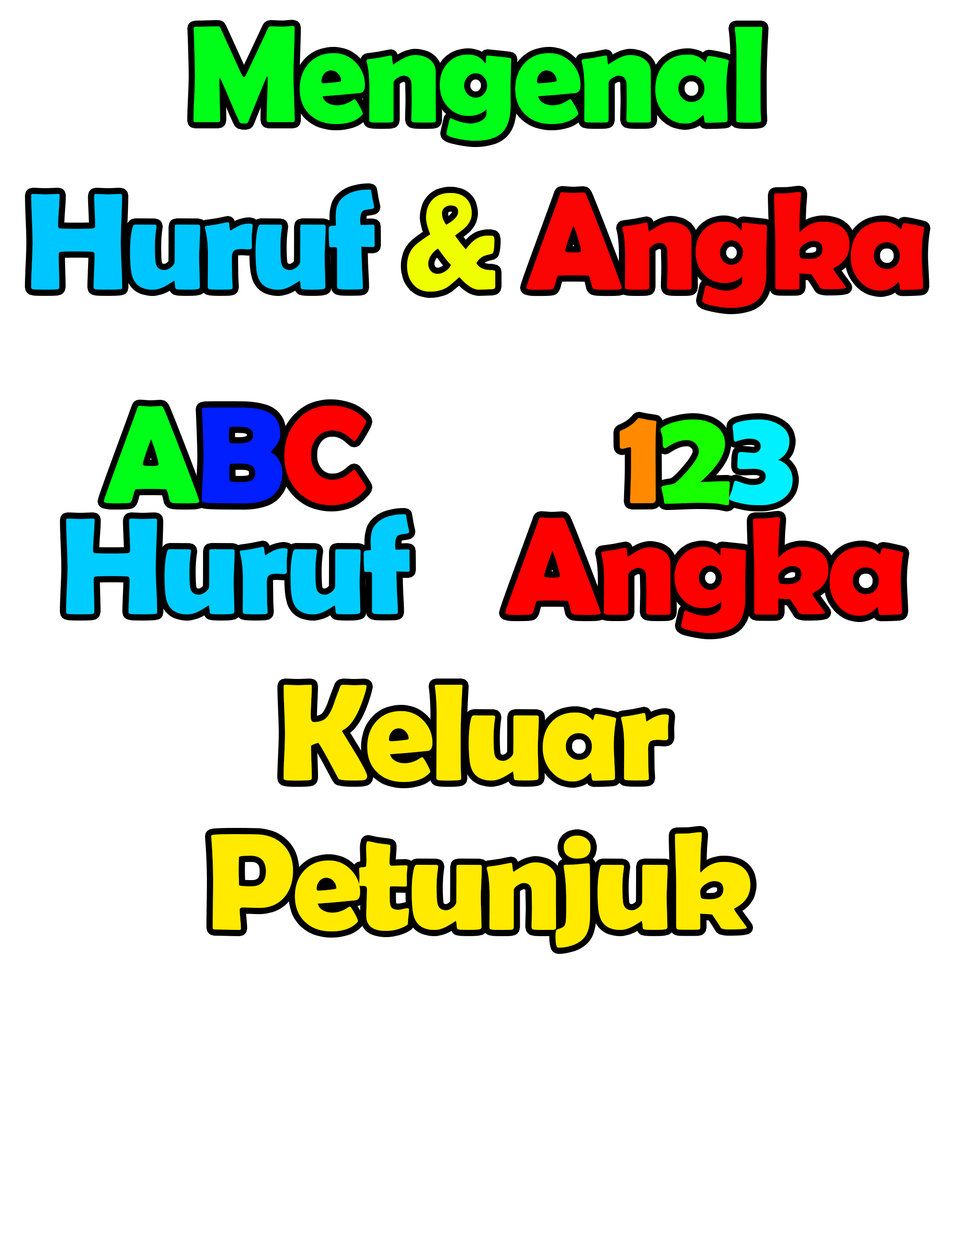
<style>
.page{position:relative;width:958px;height:1245px;background:#ffffff}
.page>*{position:absolute;margin:0}
.t1{font:139.1px "BerlinSansFBDemi-Bold";letter-spacing:-0.03em;color:#00ff18}
.t2{font:139.1px "BerlinSansFBDemi-Bold";letter-spacing:-0.03em;color:#00c6ff}
.t3{font:139.1px "BerlinSansFBDemi-Bold";letter-spacing:-0.03em;color:#f0ff00}
.t4{font:139.1px "BerlinSansFBDemi-Bold";letter-spacing:-0.03em;color:#fa0404}
.t5{font:139.1px "BerlinSansFBDemi-Bold";letter-spacing:-0.03em;color:#00ccff}
.t6{font:139.1px "BerlinSansFBDemi-Bold";letter-spacing:-0.03em;color:#001eff}
.t7{font:139.1px "BerlinSansFBDemi-Bold";letter-spacing:-0.03em;color:#ff0000}
.t8{font:139.1px "BerlinSansFBDemi-Bold";letter-spacing:-0.03em;color:#ff8a00}
.t9{font:139.1px "BerlinSansFBDemi-Bold";letter-spacing:-0.03em;color:#18ff00}
.t10{font:139.1px "BerlinSansFBDemi-Bold";letter-spacing:-0.03em;color:#00f0ff}
.t11{font:139.1px "BerlinSansFBDemi-Bold";letter-spacing:-0.03em;color:#ffea00}
</style>
<div class="page">
<p class="t1" style="left:31px;top:26px;width:893px;height:282px;text-align:center">Mengenal<br><span class="t2">Huruf </span><span class="t3">&amp; </span><span class="t4">Angka</span></p>
<p class="t5" style="left:66px;top:406px;width:344px;height:208px;text-align:center"><span class="t1">A</span><span class="t6">B</span><span class="t7">C<br></span>Huruf</p>
<p class="t7" style="left:505px;top:418px;width:398px;height:215px;text-align:center"><span class="t8">1</span><span class="t9">2</span><span class="t10">3<br></span>Angka</p>
<p class="t11" style="left:283px;top:685px;width:386px;height:97px">Keluar</p>
<p class="t11" style="left:211px;top:832px;width:539px;height:116px">Petunjuk</p>
</div>
